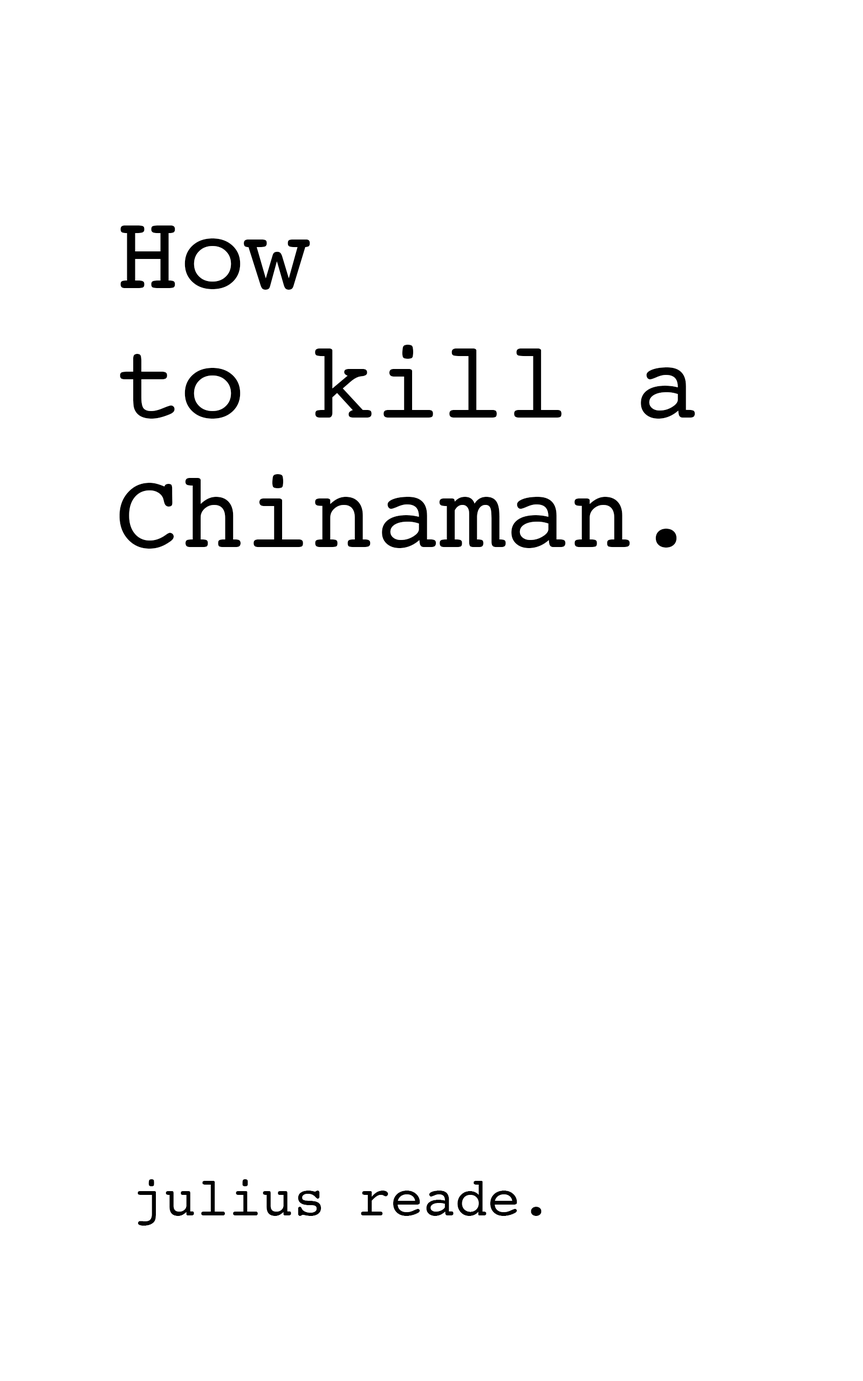
<style>
.page{position:relative;width:863px;height:1381px;background:#ffffff}
.page>*{position:absolute;margin:0}
.t1{font:107.9px "Courier";color:#000000}
.t2{font:54px "Courier";color:#000000}
</style>
<div class="page">
<p class="t1" style="left:119px;top:226px;width:576px;height:323px">How <br>to kill a <br>Chinaman.</p>
<p class="t2" style="left:138px;top:1179px;width:404px;height:47px">julius reade.</p>
</div>
